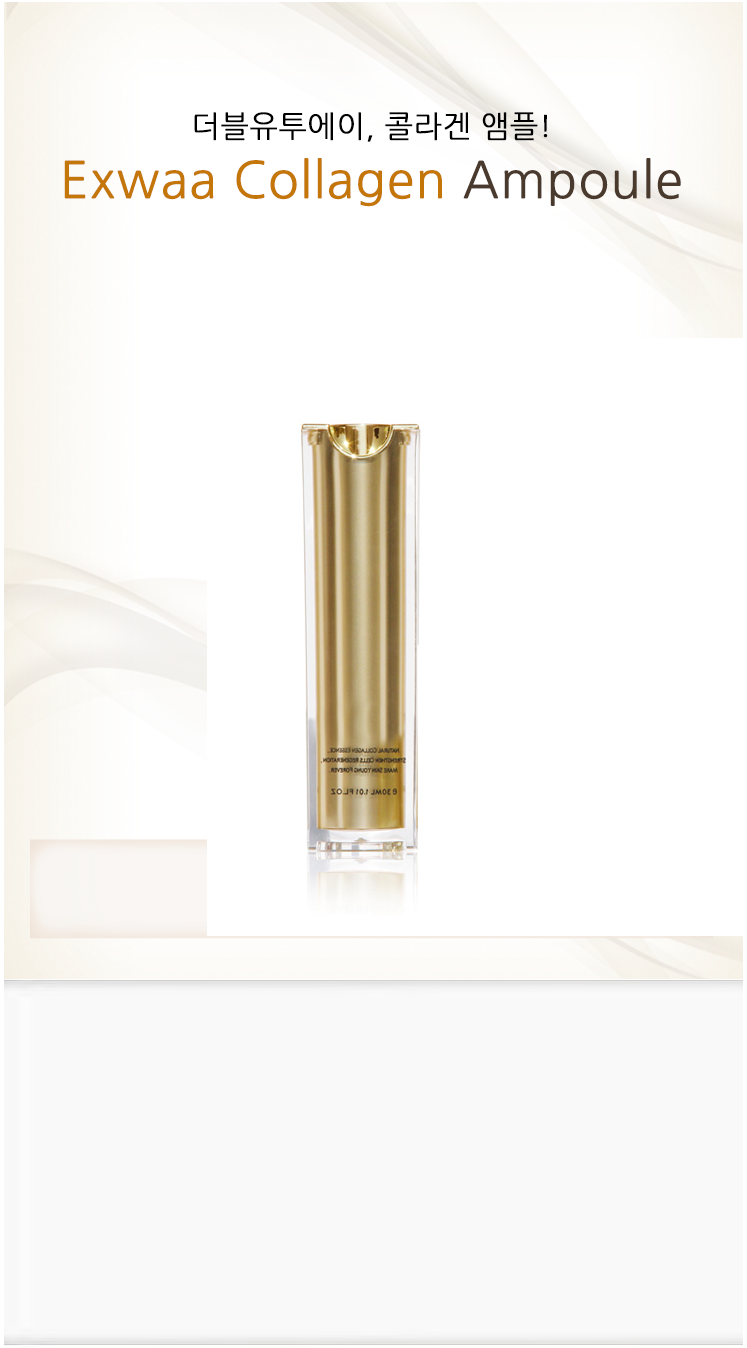
<style>
.page{position:relative;width:747px;height:1348px;background:#ffffff}
.page>*{position:absolute;margin:0}
.t1{font:30px "NanumGothic";color:#000000;font-weight:bold}
.t2{font:50px "NanumGothic";color:#c47608;font-weight:bold}
.t3{font:50px "NanumGothic";color:#4a3a2d;font-weight:bold}
</style>
<div class="page">
<p class="t1" style="left:64px;top:112px;width:617px;height:95px;text-align:center">더블유투에이, 콜라겐 앰플!<br><span class="t2">Exwaa Collagen </span><span class="t3">Ampoule</span></p>
</div>
